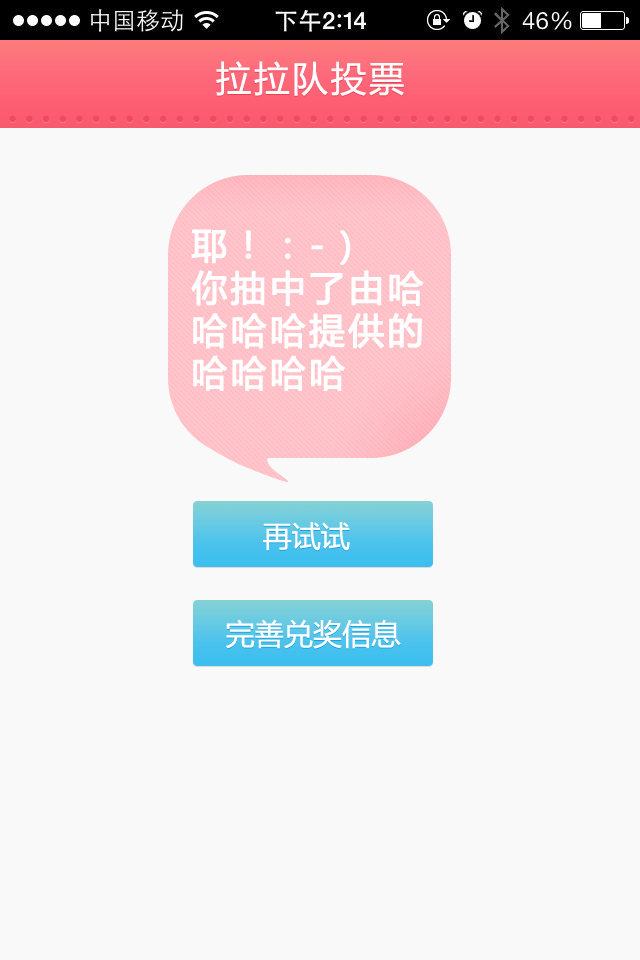
<style>
.page{position:relative;width:640px;height:960px;background:#f9f9f9}
.page>*{position:absolute;margin:0}
.t1{font:35.5px "MicrosoftYaHei";letter-spacing:0.08em;color:#fffefe}
.t2{font:52.1px "MicrosoftYaHei";letter-spacing:0.08em;color:#f3485d}
.t3{font:35.5px "MicrosoftYaHei";letter-spacing:0.08em;color:#ffffff;font-weight:bold}
.t4{font:29.2px "MicrosoftYaHei";color:#ffffff}
</style>
<div class="page">
<p class="t1" style="left:216px;top:61px;width:188px;height:35px">拉拉队投票</p>
<p class="t2" style="left:9px;top:115px;width:626px;height:8px">......................................</p>
<p class="t3" style="left:191px;top:229px;width:233px;height:162px">耶！：-）<br>你抽中了由哈<br>哈哈哈提供的<br>哈哈哈哈</p>
<p class="t4" style="left:263px;top:522px;width:87px;height:29px">再试试</p>
<p class="t4" style="left:226px;top:619px;width:175px;height:30px">完善兑奖信息</p>
</div>
